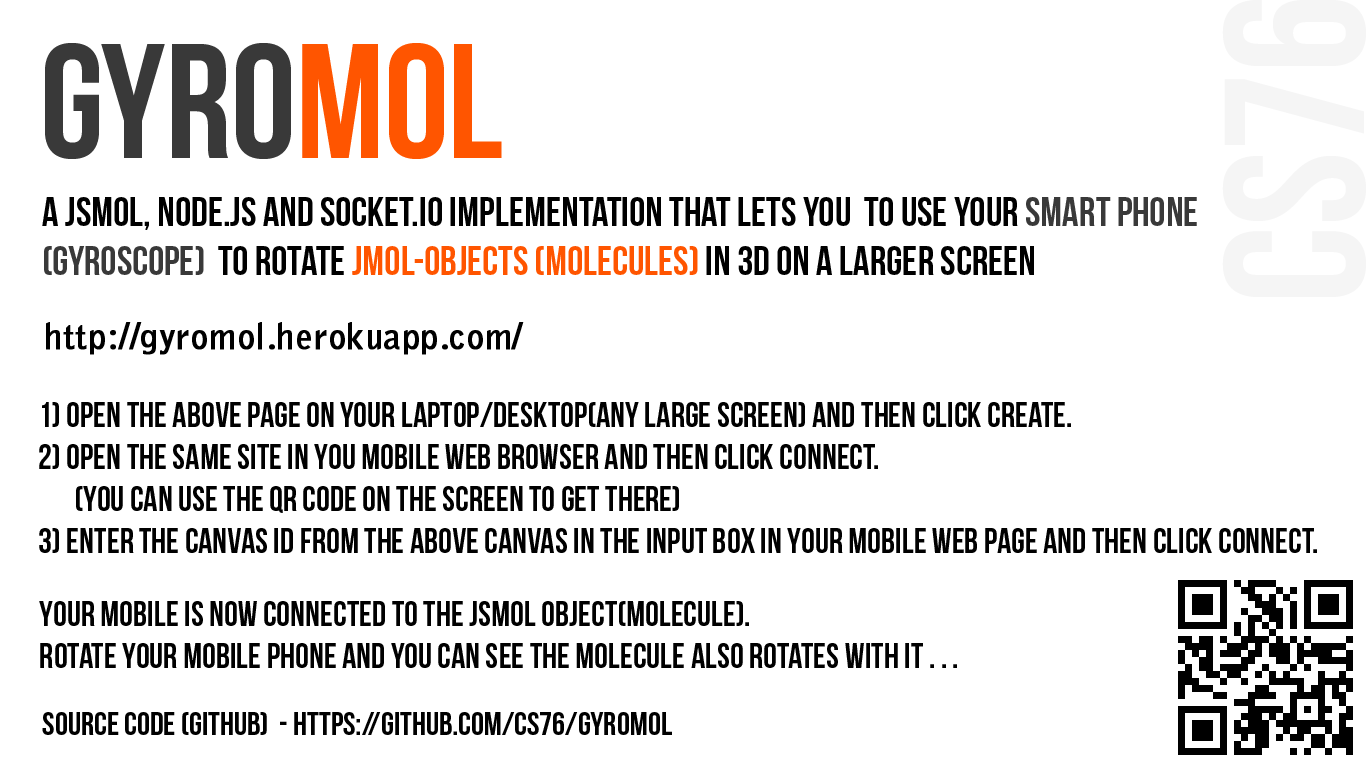
<style>
.page{position:relative;width:1366px;height:768px;background:#ffffff}
.page>*{position:absolute;margin:0}
.t1{font:199px "BebasNeue";color:#f5f5f5}
.t2{font:163px "BebasNeue";color:#393939}
.t3{font:163px "BebasNeue";color:#ff5500}
.t4{font:41px "BebasNeue";color:#000000}
.t5{font:41px "BebasNeue";color:#393939}
.t6{font:41px "BebasNeue";color:#ff5500}
.t7{font:35px "BellGothicStd-Bold";color:#000000;font-weight:bold}
.t8{font:35px "BebasNeue";color:#000000}
.t9{font:33px "BebasNeue";color:#000000}
</style>
<div class="page">
<p class="t1" style="left:1222px;top:0px;width:144px;height:297px;rotate:-90deg">CS76</p>
<p class="t2" style="left:45px;top:43px;width:457px;height:116px">Gyro<span class="t3">MOL</span></p>
<p class="t4" style="left:42px;top:197px;width:1155px;height:78px">A JsMOL, Node.js and Socket.IO implementation that lets you  to use your <span class="t5">smart phone <br>(gyroscope)  </span>to rotate<span class="t6"> Jmol-Objects (Molecules)</span> in 3D on a larger screen</p>
<p class="t7" style="left:46px;top:322px;width:478px;height:33px">http://gyromol.herokuapp.com/</p>
<p class="t8" style="left:39px;top:402px;width:1278px;height:151px">1) Open the above page on your laptop/desktop(any large screen) and then click CREATE. <br>2) Open the same site in you mobile web browser and then click CONNECT.<br> (you can use the QR code on the screen to get there)<br>3) Enter the canvas ID from the above canvas in the input box in your mobile web page and then click CONNECT.</p>
<p class="t8" style="left:39px;top:601px;width:918px;height:67px">Your mobile is now connected to the jsmol object(molecule). <br>Rotate your mobile phone and you can see the molecule also rotates with it . . .</p>
<p class="t9" style="left:42px;top:712px;width:630px;height:23px">SOURCE CODE (GITHUB)  - https://github.com/CS76/GyroMol</p>
</div>
